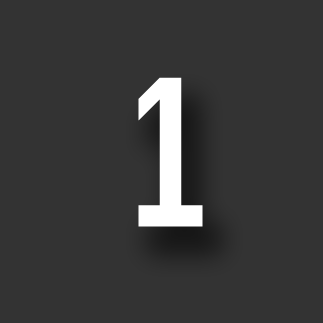
<style>
.page{position:relative;width:323px;height:323px;background:#333333}
.page>*{position:absolute;margin:0}
.t1{font:170px "Manteka";color:#ffffff}
</style>
<div class="page">
<p class="t1" style="left:138px;top:77px;width:65px;height:150px">1</p>
</div>
